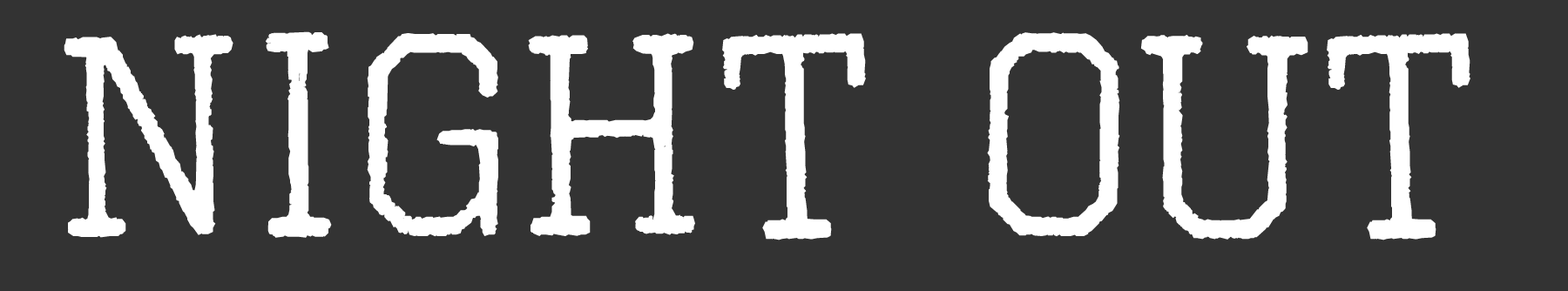
<style>
.page{position:relative;width:1568px;height:291px;background:#333333}
.page>*{position:absolute;margin:0}
.t1{font:286px "OctinVintageFree";color:#ffffff;font-weight:bold}
</style>
<div class="page">
<p class="t1" style="left:64px;top:31px;width:1406px;height:209px">Night Out</p>
</div>
